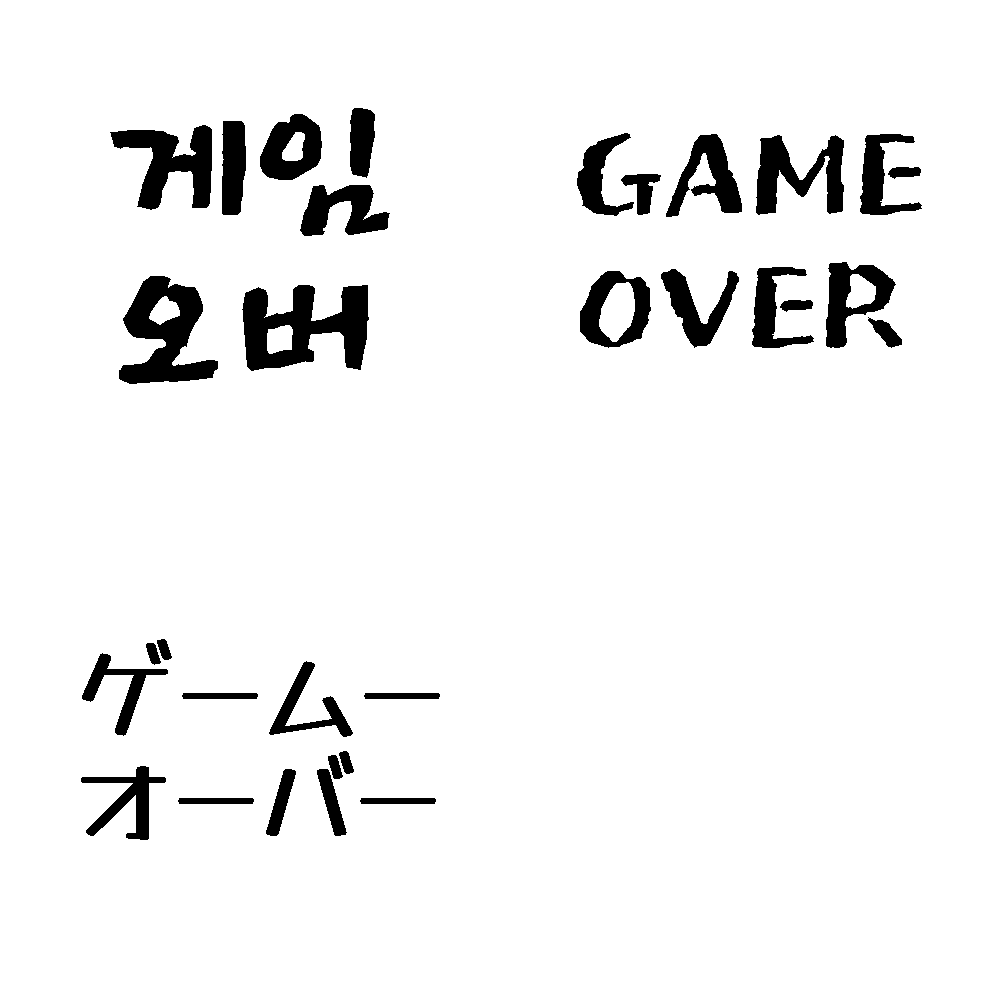
<style>
.page{position:relative;width:1000px;height:1000px;background:#ffffff}
.page>*{position:absolute;margin:0}
.t1{font:157.8px/161.5px "JejuHallasan";color:#000000}
.t2{font:129.9px/132.9px "JejuHallasan";color:#000000}
.t3{font:129.9px/132.9px "JejuHallasan"}
.t4{font:101.9px/104.3px "YuseiMagic-Regular";color:#000000}
</style>
<div class="page">
<p class="t1" style="left:110px;top:108px;width:280px;height:276px">게임<br>오버</p>
<p class="t2" style="left:577px;top:133px;width:345px;height:215px">GAME<br>OVER</p>
<p class="t3" style="left:582px;top:143px;width:345px;height:215px">GAME<br>OVER</p>
<p class="t4" style="left:81px;top:639px;width:359px;height:201px">ゲームー<br>オーバー</p>
</div>
